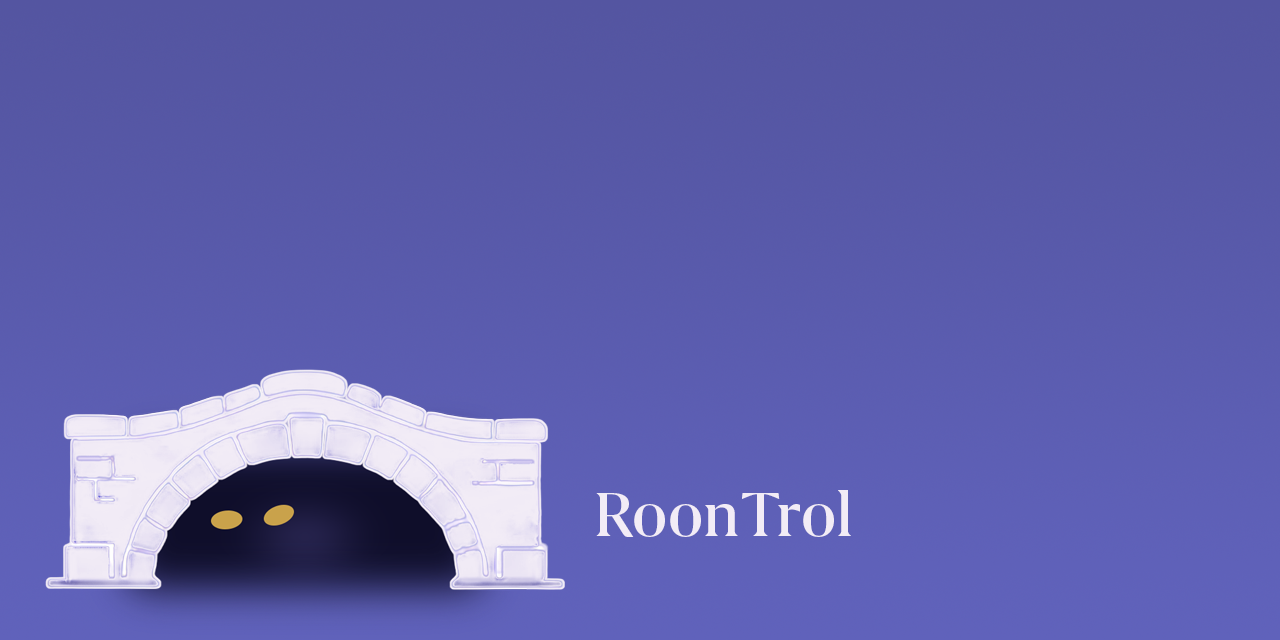
<style>
.page{position:relative;width:1280px;height:640px}
.page>*{position:absolute;margin:0}
.t1{font:72px "GrifoM-Medium";color:#f2ecf6}
</style>
<div class="page">
<p class="t1" style="left:596px;top:490px;width:255px;height:47px">RoonTrol</p>
</div>
